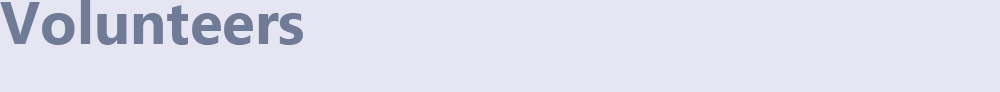
<style>
.page{position:relative;width:1000px;height:92px;background:#e6e6f2}
.page>*{position:absolute;margin:0}
.t1{font:60px "SegoeUI-Bold";color:#707b98}
</style>
<div class="page">
<p class="t1" style="left:0px;top:0px;width:303px;height:45px">Volunteers</p>
</div>
